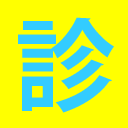
<style>
.page{position:relative;width:128px;height:128px;background:#ffff00}
.page>*{position:absolute;margin:0}
.t1{font:100px "KozGoPro-Bold";color:#33ccff}
</style>
<div class="page">
<p class="t1" style="left:18px;top:17px;width:96px;height:96px">診</p>
</div>
